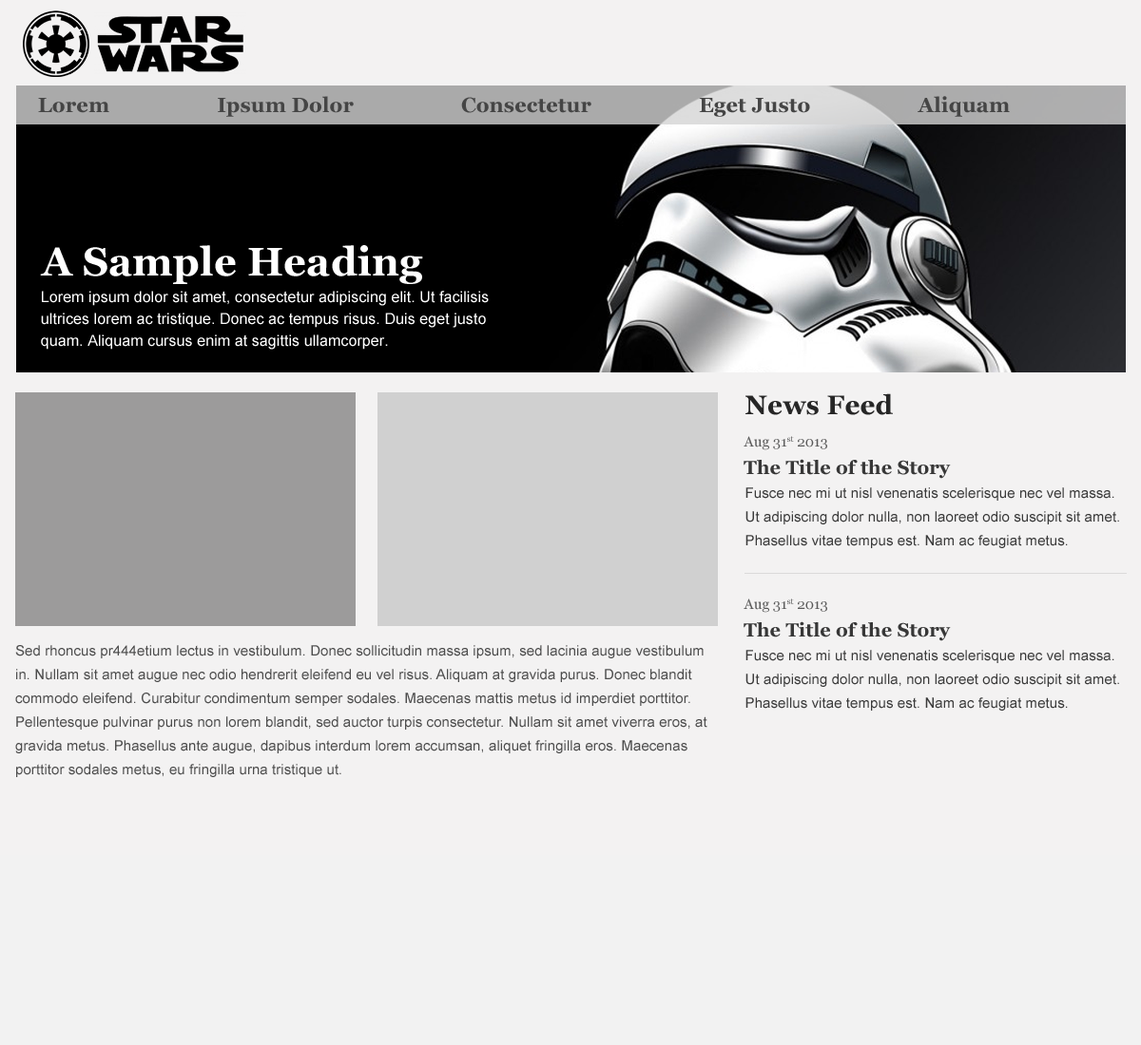
<style>
.page{position:relative;width:1141px;height:1045px;background:#f3f2f2}
.page>*{position:absolute;margin:0}
.t1{font:20.7px "Georgia-Bold";letter-spacing:0.005em;color:#454545}
.t2{font:39.9px "Georgia-Bold";letter-spacing:0.005em;color:#ffffff}
.t3{font:15.2px/21.9px "ArialMT";letter-spacing:0.005em;color:#ffffff}
.t4{font:26.6px "Georgia-Bold";letter-spacing:0.005em;color:#262626}
.t5{font:14.3px "Georgia";letter-spacing:0.005em;color:#5a5a5a}
.t6{font:19px "Georgia-Bold";letter-spacing:0.005em;color:#373737}
.t7{font:14.3px/23.8px "ArialMT";letter-spacing:0.005em;color:#3b3b3b}
.t8{font:14.3px/23.8px "ArialMT";letter-spacing:0.005em;color:#4d4d4d}
</style>
<div class="page">
<p class="t1" style="left:38px;top:96px;width:971px;height:21px">Lorem                    Ipsum Dolor                    Consectetur                    Eget Justo                    Aliquam</p>
<p class="t2" style="left:40px;top:245px;width:383px;height:39px">A Sample Heading</p>
<p class="t3" style="left:41px;top:291px;width:448px;height:59px">Lorem ipsum dolor sit amet, consectetur adipiscing elit. Ut facilisis ultrices lorem ac tristique. Donec ac tempus risus. Duis eget justo quam. Aliquam cursus enim at sagittis ullamcorper.</p>
<p class="t4" style="left:745px;top:393px;width:147px;height:22px">News Feed</p>
<p class="t5" style="left:743px;top:436px;width:84px;height:15px">Aug 31st 2013</p>
<p class="t6" style="left:743px;top:459px;width:207px;height:20px">The Title of the Story</p>
<p class="t7" style="left:745px;top:488px;width:374px;height:60px">Fusce nec mi ut nisl venenatis scelerisque nec vel massa. Ut adipiscing dolor nulla, non laoreet odio suscipit sit amet. Phasellus vitae tempus est. Nam ac feugiat metus.</p>
<p class="t5" style="left:743px;top:599px;width:84px;height:14px">Aug 31st 2013</p>
<p class="t6" style="left:743px;top:622px;width:207px;height:20px">The Title of the Story</p>
<p class="t8" style="left:15px;top:645px;width:692px;height:132px">Sed rhoncus pr444etium lectus in vestibulum. Donec sollicitudin massa ipsum, sed lacinia augue vestibulum in. Nullam sit amet augue nec odio hendrerit eleifend eu vel risus. Aliquam at gravida purus. Donec blandit commodo eleifend. Curabitur condimentum semper sodales. Maecenas mattis metus id imperdiet porttitor. Pellentesque pulvinar purus non lorem blandit, sed auctor turpis consectetur. Nullam sit amet viverra eros, at gravida metus. Phasellus ante augue, dapibus interdum lorem accumsan, aliquet fringilla eros. Maecenas porttitor sodales metus, eu fringilla urna tristique ut.</p>
<p class="t7" style="left:745px;top:650px;width:374px;height:61px">Fusce nec mi ut nisl venenatis scelerisque nec vel massa. Ut adipiscing dolor nulla, non laoreet odio suscipit sit amet. Phasellus vitae tempus est. Nam ac feugiat metus.</p>
</div>
